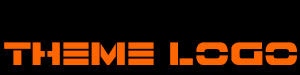
<style>
.page{position:relative;width:300px;height:75px;background:#000000}
.page>*{position:absolute;margin:0}
.t1{font:30px "7thServiceExtraBold";color:#ff6600}
</style>
<div class="page">
<p class="t1" style="left:4px;top:42px;width:293px;height:23px">Theme LOGO</p>
</div>
